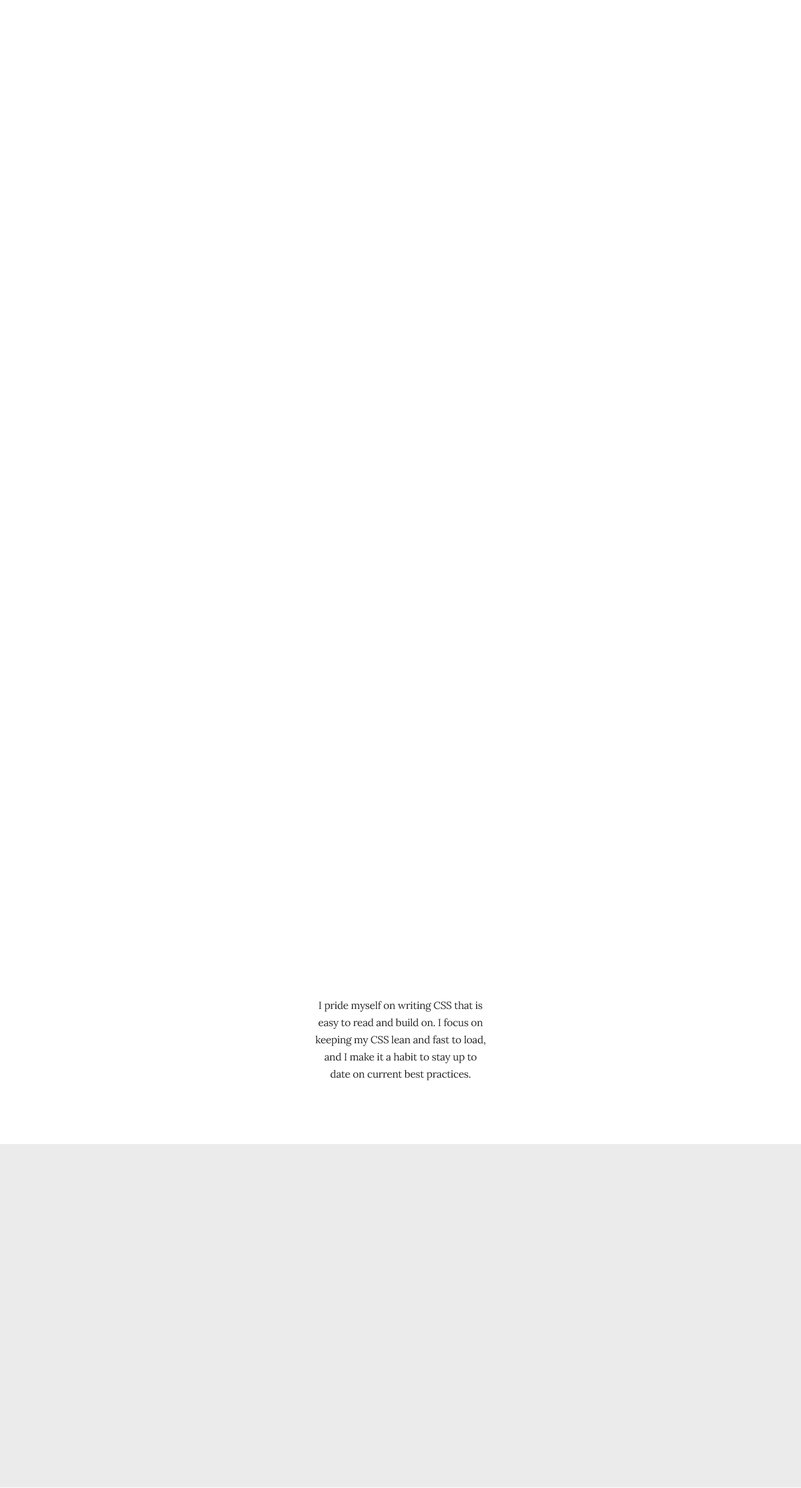
<style>
.page{position:relative;width:801px;height:1488px;background:#ffffff}
.page>*{position:absolute;margin:0}
.t1{font:10.3px/17.2px "Lora-Regular";letter-spacing:-0.02em;color:#2b2b2b}
</style>
<div class="page">
<p class="t1" style="left:315px;top:1001px;width:171px;height:80px;text-align:center">I pride myself on writing CSS that is easy to read and build on. I focus on keeping my CSS lean and fast to load, and I make it a habit to stay up to date on current best practices.</p>
</div>
